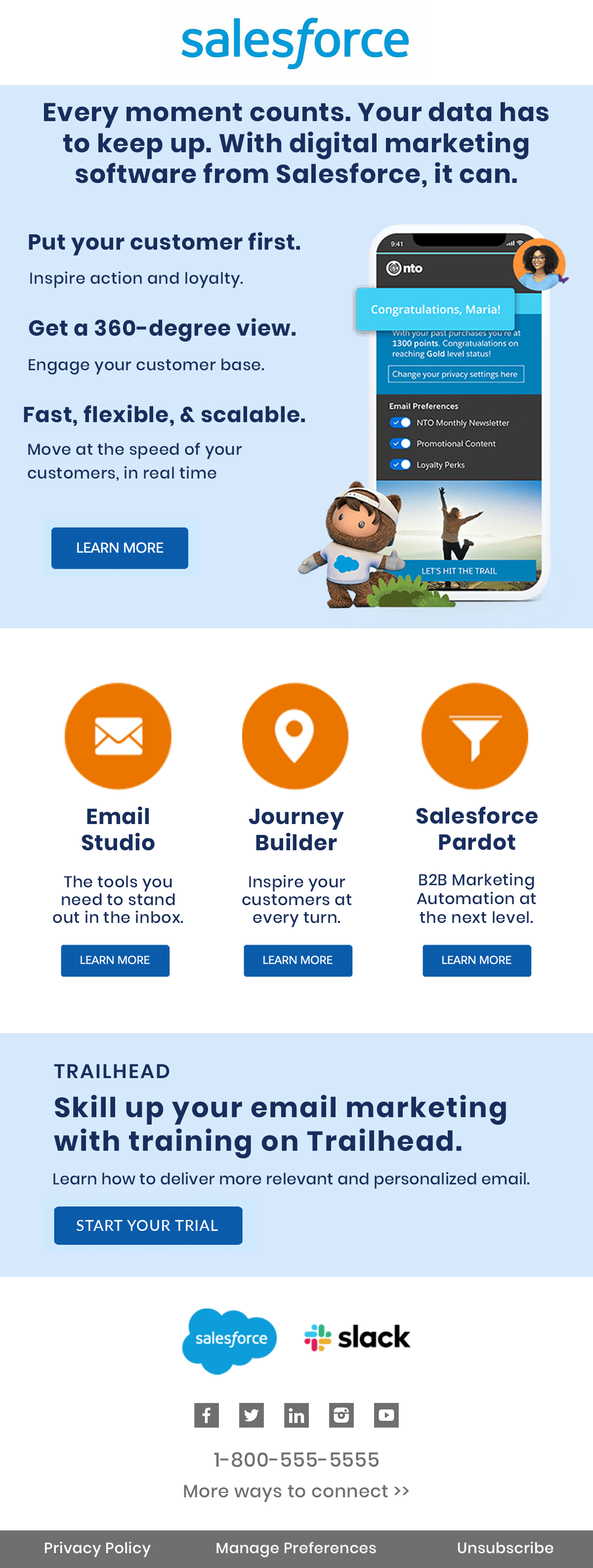
<style>
.page{position:relative;width:593px;height:1568px;background:#ffffff}
.page>*{position:absolute;margin:0}
.t1{font:25.7px "Poppins-Bold";letter-spacing:0.025em;color:#172e5d}
.t2{font:21.8px "Poppins-Bold";letter-spacing:0.025em;color:#172e5d}
.t3{font:15.8px "Poppins-Medium";letter-spacing:0.025em;color:#172e5d}
.t4{font:15.8px/23.7px "Poppins-Medium";letter-spacing:0.025em;color:#172e5d}
.t5{font:15.8px/17.8px "Poppins-Medium";letter-spacing:0.025em;color:#172e5d}
.t6{font:19.8px "Poppins-SemiBold";letter-spacing:0.075em;color:#172e5d}
.t7{font:27.7px "Poppins-Bold";letter-spacing:0.05em;color:#172e5d}
.t8{font:15.8px "Poppins-Medium";letter-spacing:0.01em;color:#172e5d}
.t9{font:14.8px "Lato-Medium";letter-spacing:0.05em;color:#ffffff}
.t10{font:19.8px "Poppins-Medium";letter-spacing:0.025em;color:#6f6f6f}
.t11{font:17.8px "Poppins-Medium";letter-spacing:0.025em;color:#6f6f6f}
.t12{font:14.8px "Poppins-Medium";letter-spacing:0.025em;color:#ffffff}
</style>
<div class="page">
<p class="t1" style="left:44px;top:102px;width:505px;height:86px;text-align:center">Every moment counts. Your data has<br>to keep up. With digital marketing<br>software from Salesforce, it can.</p>
<p class="t2" style="left:29px;top:232px;width:271px;height:24px">Put your customer first.</p>
<p class="t3" style="left:30px;top:271px;width:213px;height:17px">Inspire action and loyalty.</p>
<p class="t2" style="left:29px;top:318px;width:267px;height:24px">Get a 360-degree view.</p>
<p class="t3" style="left:29px;top:358px;width:235px;height:17px">Engage your customer base.</p>
<p class="t2" style="left:24px;top:404px;width:281px;height:22px">Fast, flexible, &amp; scalable.</p>
<p class="t4" style="left:28px;top:442px;width:214px;height:39px">Move at the speed of your<br>customers, in real time</p>
<p class="t2" style="left:82px;top:806px;width:73px;height:45px;text-align:center">Email<br>Studio</p>
<p class="t2" style="left:249px;top:809px;width:95px;height:42px;text-align:center">Journey<br>Builder</p>
<p class="t2" style="left:416px;top:806px;width:122px;height:44px;text-align:center">Salesforce<br>Pardot</p>
<p class="t5" style="left:53px;top:875px;width:130px;height:48px;text-align:center">The tools you<br>need to stand<br>out in the inbox.</p>
<p class="t5" style="left:242px;top:875px;width:109px;height:52px;text-align:center">Inspire your<br>customers at<br>every turn.</p>
<p class="t3" style="left:417px;top:873px;width:119px;height:50px;text-align:center">B2B Marketing<br>Automation at<br>the next level.</p>
<p class="t6" style="left:54px;top:1064px;width:116px;height:14px">TRAILHEAD</p>
<p class="t7" style="left:54px;top:1095px;width:452px;height:64px">Skill up your email marketing<br>with training on Trailhead.</p>
<p class="t8" style="left:53px;top:1172px;width:476px;height:17px">Learn how to deliver more relevant and personalized email.</p>
<p class="t9" style="left:76px;top:1220px;width:142px;height:11px">START YOUR TRIAL</p>
<p class="t10" style="left:214px;top:1452px;width:165px;height:15px">1-800-555-5555</p>
<p class="t11" style="left:184px;top:1485px;width:225px;height:17px">More ways to connect &gt;&gt;</p>
<p class="t12" style="left:45px;top:1541px;width:106px;height:16px">Privacy Policy</p>
<p class="t12" style="left:217px;top:1542px;width:159px;height:15px">Manage Preferences</p>
<p class="t12" style="left:458px;top:1541px;width:96px;height:13px">Unsubscribe</p>
</div>
